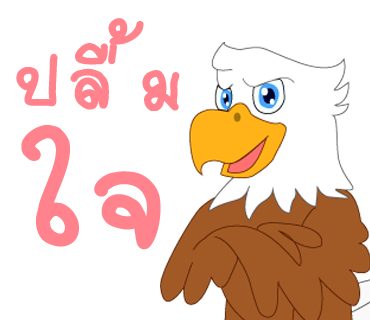
<style>
.page{position:relative;width:370px;height:320px;background:#ffffff}
.page>*{position:absolute;margin:0}
.t1{font:111px "2005_iannnnnMTV";letter-spacing:0.075em;color:#ff828c;scale:1.06 1}
.t2{font:220px "2005_iannnnnMTV";letter-spacing:0.015em;color:#ff828c;scale:1.06 1}
</style>
<div class="page">
<p class="t1" style="left:16px;top:18px;width:164px;height:93px;rotate:1deg">ปลื้ม</p>
<p class="t2" style="left:21px;top:125px;width:140px;height:125px">ใจ</p>
</div>
